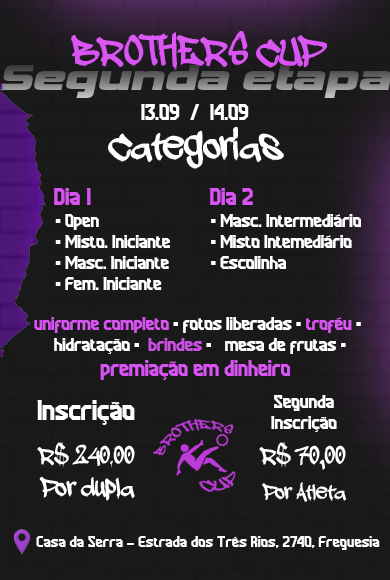
<style>
.page{position:relative;width:390px;height:580px;background:#1a1a1a}
.page>*{position:absolute;margin:0}
.t1{font:37.5px "Vipnagorgialla-BoldItalic"}
.t2{font:20.6px "Sportzan";color:#ffffff}
.t3{font:22.9px "Sportzan";color:#d854f2}
.t4{font:17.6px "Sportzan";color:#ffffff}
.t5{font:20.7px "Sportzan";color:#d854f2}
.t6{font:17.7px "Sportzan";color:#d854f2}
.t7{font:17.7px "Sportzan";color:#ffffff}
.t8{font:17.7px "Sportzan";color:#ca50e2}
.t9{font:26.8px "Sportzan";color:#ffffff}
.t10{font:18px "Sportzan";color:#ffffff}
.t11{font:15.3px "Sportzan";color:#ffffff}
</style>
<div class="page">
<p class="t1" style="left:1px;top:65px;width:391px;height:33px">Segunda etapa</p>
<p class="t2" style="left:141px;top:104px;width:108px;height:16px">13.09  /  14.09</p>
<p class="t3" style="left:53px;top:188px;width:38px;height:17px">Dia 1</p>
<p class="t3" style="left:209px;top:188px;width:44px;height:17px">Dia 2</p>
<p class="t4" style="left:55px;top:214px;width:115px;height:76px">• Open<br> • Misto. Iniciante<br> • Masc. Iniciante<br> • Fem. Iniciante</p>
<p class="t4" style="left:211px;top:214px;width:150px;height:55px">• Masc. Intermediário<br> • Misto Intemediário<br> • Escolinha</p>
<p class="t5" style="left:34px;top:317px;width:327px;height:63px;text-align:center"><span class="t6">uniforme completo</span><span class="t7"> • fotos liberadas • </span><span class="t6">troféu </span><span class="t7">•<br> hidratação •  </span><span class="t8">brindes </span><span class="t7">•   mesa de frutas •<br></span>premiação em dinheiro</p>
<p class="t9" style="left:37px;top:400px;width:98px;height:25px">Inscrição</p>
<p class="t10" style="left:271px;top:395px;width:66px;height:37px;text-align:center">Segunda<br>Inscrição</p>
<p class="t11" style="left:36px;top:536px;width:344px;height:14px">Casa da Serra - Estrada dos Três Rios, 2740, Freguesia</p>
</div>
